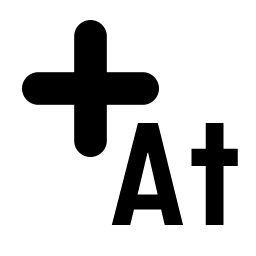
<style>
.page{position:relative;width:256px;height:256px;background:#ffffff}
.page>*{position:absolute;margin:0}
.t1{font:120px "BMDoHyeon";color:#000000}
</style>
<div class="page">
<p class="t1" style="left:111px;top:123px;width:127px;height:102px">At</p>
</div>
